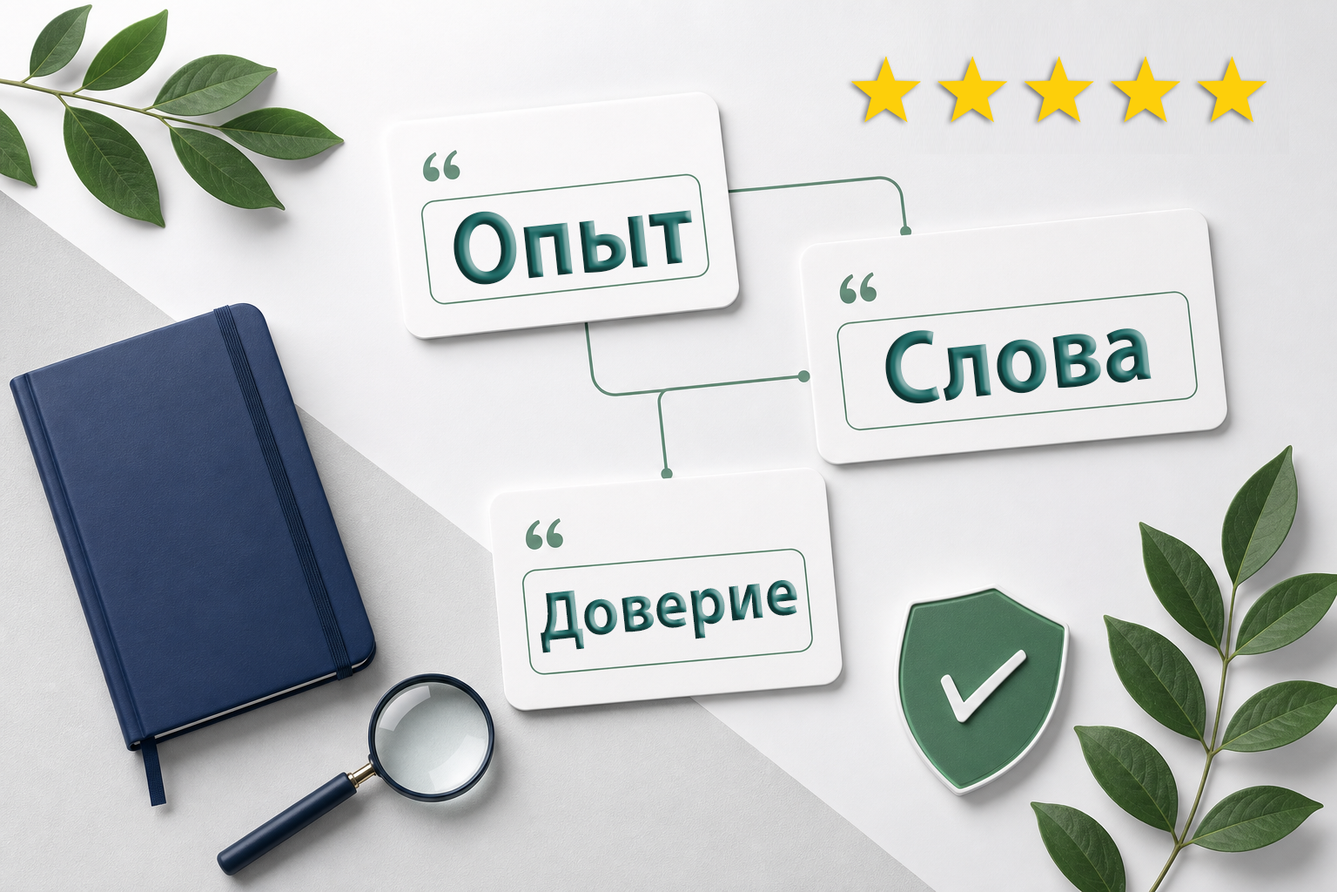
<style>
.page{position:relative;width:1337px;height:892px}
.page>*{position:absolute;margin:0}
.t1{font:104.5px "MyriadPro-Bold";scale:0.92 1}
.t2{font:69.7px "MyriadPro-Bold";scale:0.92 1}
</style>
<div class="page">
<p class="t1" style="left:454px;top:210px;width:238px;height:75px;rotate:-6deg">Опыт</p>
<p class="t1" style="left:886px;top:328px;width:266px;height:75px;rotate:-6deg">Слова</p>
<p class="t2" style="left:541px;top:580px;width:257px;height:73px;rotate:-6deg">Доверие</p>
</div>
